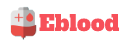
<style>
.page{position:relative;width:122px;height:46px;background:#ffffff}
.page>*{position:absolute;margin:0}
.t1{font:22px "AlfaSlabOne-Regular";color:#f7505a}
</style>
<div class="page">
<p class="t1" style="left:39px;top:13px;width:80px;height:19px">Eblood</p>
</div>
